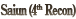
<style>
.page{position:relative;width:76px;height:19px;background:#ffffff}
.page>*{position:absolute;margin:0}
.t1{font:14px "RyuminPro-ExBold";letter-spacing:-0.11em;color:#4a3f32;font-weight:bold;scale:0.8 1}
</style>
<div class="page">
<p class="t1" style="left:0px;top:4px;width:76px;height:14px">Saiun (4th Recon)</p>
</div>
